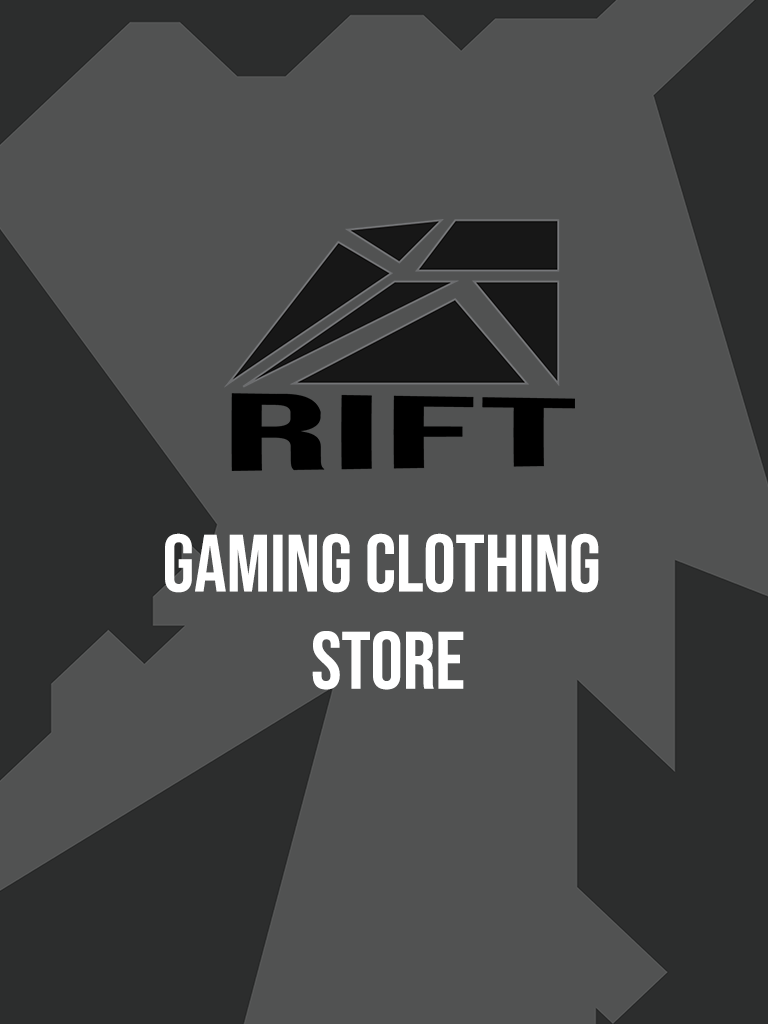
<style>
.page{position:relative;width:768px;height:1024px;background:#515252}
.page>*{position:absolute;margin:0}
.t1{font:80.9px "BebasNeue-Regular";color:#ffffff}
</style>
<div class="page">
<p class="t1" style="left:165px;top:533px;width:434px;height:157px;text-align:center">Gaming clothing <br>store</p>
</div>
